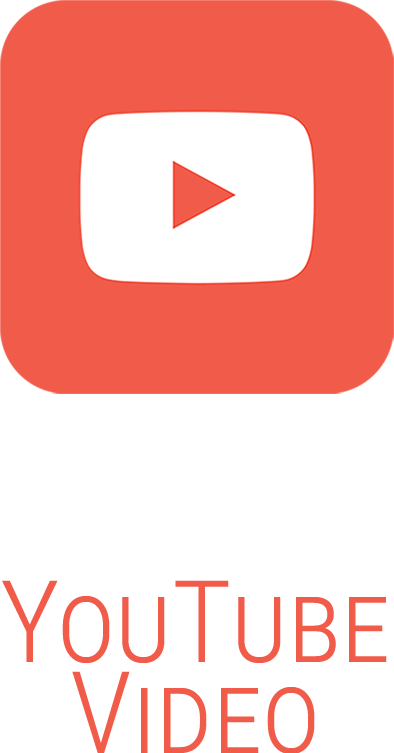
<style>
.page{position:relative;width:394px;height:753px;background:#ffffff}
.page>*{position:absolute;margin:0}
.t1{font:114.3px/91.4px "RobotoCondensed-Light";color:#f15b4a;font-variant:small-caps}
</style>
<div class="page">
<p class="t1" style="left:2px;top:580px;width:385px;height:174px;text-align:center">YouTube<br>Video</p>
</div>
